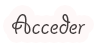
<style>
.page{position:relative;width:95px;height:50px;background:#fef8f8}
.page>*{position:absolute;margin:0}
.t1{font:30px "GiddyupStd";color:#453f3f}
</style>
<div class="page">
<p class="t1" style="left:12px;top:14px;width:74px;height:20px">Acceder</p>
</div>
